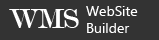
<style>
.page{position:relative;width:159px;height:40px;background:#333333}
.page>*{position:absolute;margin:0}
.t1{font:14px "MicrosoftNewTaiLue";color:#ffffff}
.t2{font:30px "Modern-Regular";color:#ffffff}
</style>
<div class="page">
<p class="t1" style="left:86px;top:6px;width:52px;height:27px">WebSite<br>Builder</p>
<p class="t2" style="left:9px;top:9px;width:70px;height:19px">WMS</p>
</div>
